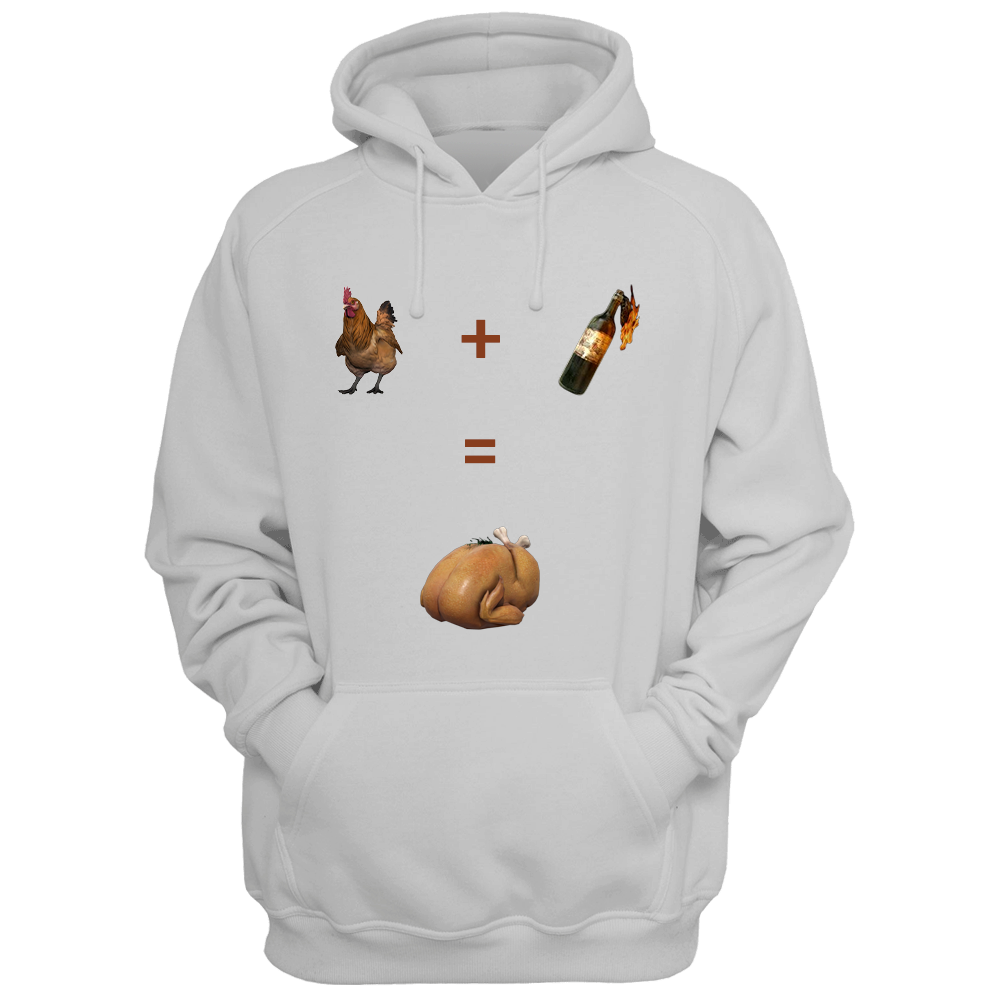
<style>
.page{position:relative;width:1000px;height:1000px;background:#ffffff}
.page>*{position:absolute;margin:0}
.t1{font:90px "Stratum2-Medium";letter-spacing:-0.05em;color:#873d1d;font-weight:bold}
</style>
<div class="page">
<p class="t1" style="left:461px;top:319px;width:39px;height:39px">+</p>
<p class="t1" style="left:465px;top:439px;width:31px;height:25px">=</p>
</div>
